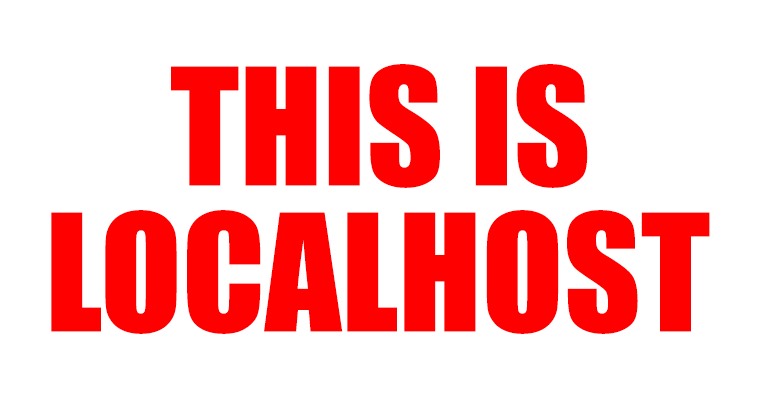
<style>
.page{position:relative;width:760px;height:406px;background:#ffffff}
.page>*{position:absolute;margin:0}
.t1{font:150px "Impact";color:#ff0000}
</style>
<div class="page">
<p class="t1" style="left:171px;top:64px;width:417px;height:124px">THIS IS</p>
<p class="t1" style="left:51px;top:210px;width:659px;height:124px">LOCALHOST</p>
</div>
